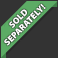
<style>
.page{position:relative;width:58px;height:58px;background:#333333}
.page>*{position:absolute;margin:0}
.t1{font:9px/9px "MyriadPro-Black";color:#fefefe}
</style>
<div class="page">
<p class="t1" style="left:4px;top:3px;width:42px;height:43px;text-align:center;rotate:-45deg">SOLD<br>SEPARATELY!</p>
</div>
